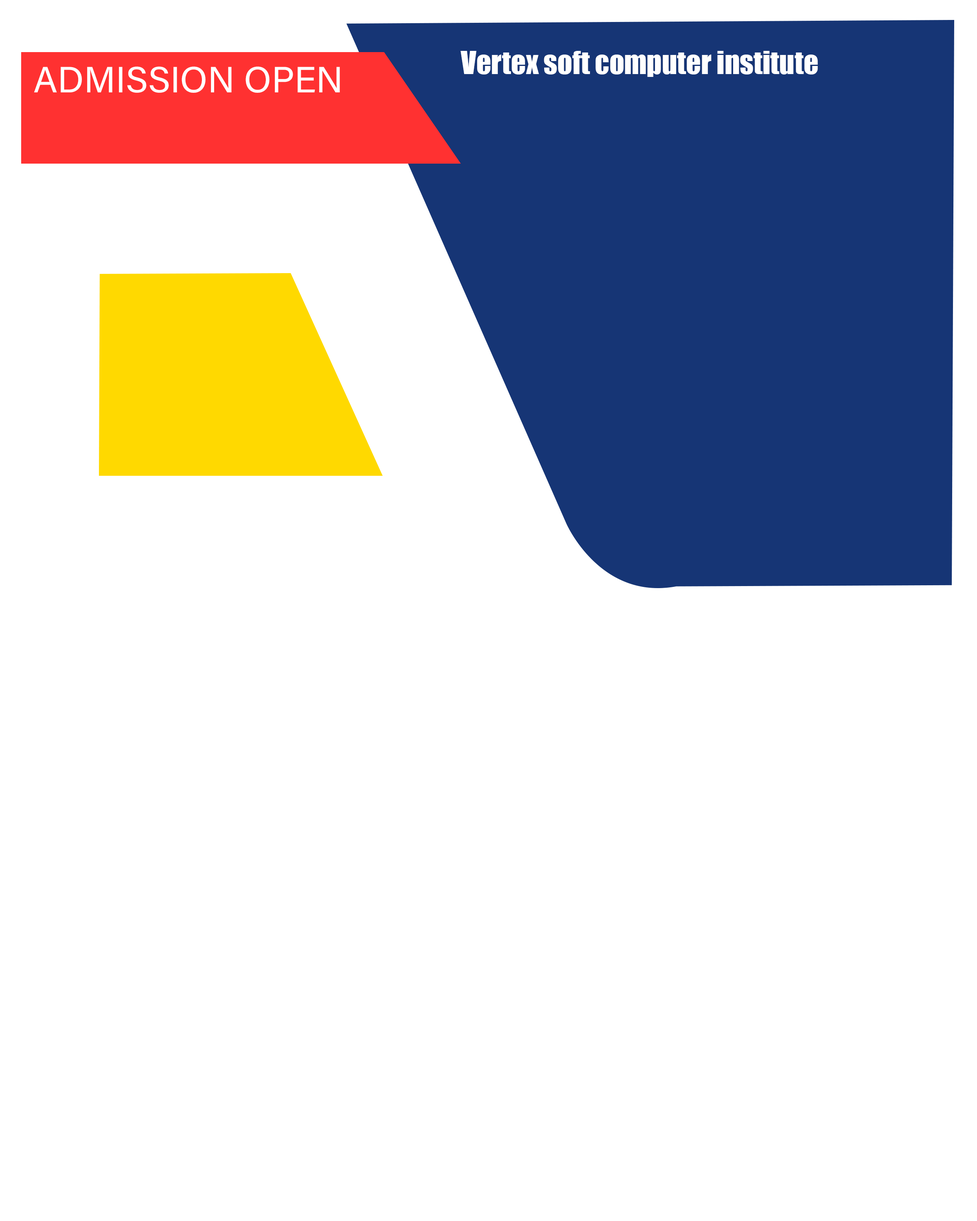
<style>
.page{position:relative;width:977px;height:1221px;background:#ffffff}
.page>*{position:absolute;margin:0}
.t1{font:29.2px "Impact";color:#ffffff}
.t2{font:36.5px "AcuminConcept-Regular";color:#ffffff}
</style>
<div class="page">
<p class="t1" style="left:460px;top:51px;width:358px;height:26px">Vertex soft computer institute</p>
<p class="t2" style="left:34px;top:66px;width:306px;height:27px">ADMISSION OPEN</p>
</div>
